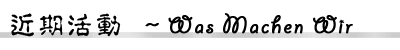
<style>
.page{position:relative;width:400px;height:50px;background:#ffffff}
.page>*{position:absolute;margin:0}
.t1{font:27px "GiddyupStd";letter-spacing:0.06em;color:#000000;font-weight:bold}
.t2{font:27px "¾­µä·±µ­¹Å Regular";letter-spacing:0.06em;color:#000000}
.t3{font:27px "¾­µä·±µ­¹Å Regular";letter-spacing:0.06em;color:#000000;font-weight:bold}
</style>
<div class="page">
<p class="t1" style="left:11px;top:13px;width:342px;height:24px"><span class="t2">近期活动 </span><span class="t3">～</span>Was Machen Wir</p>
</div>
